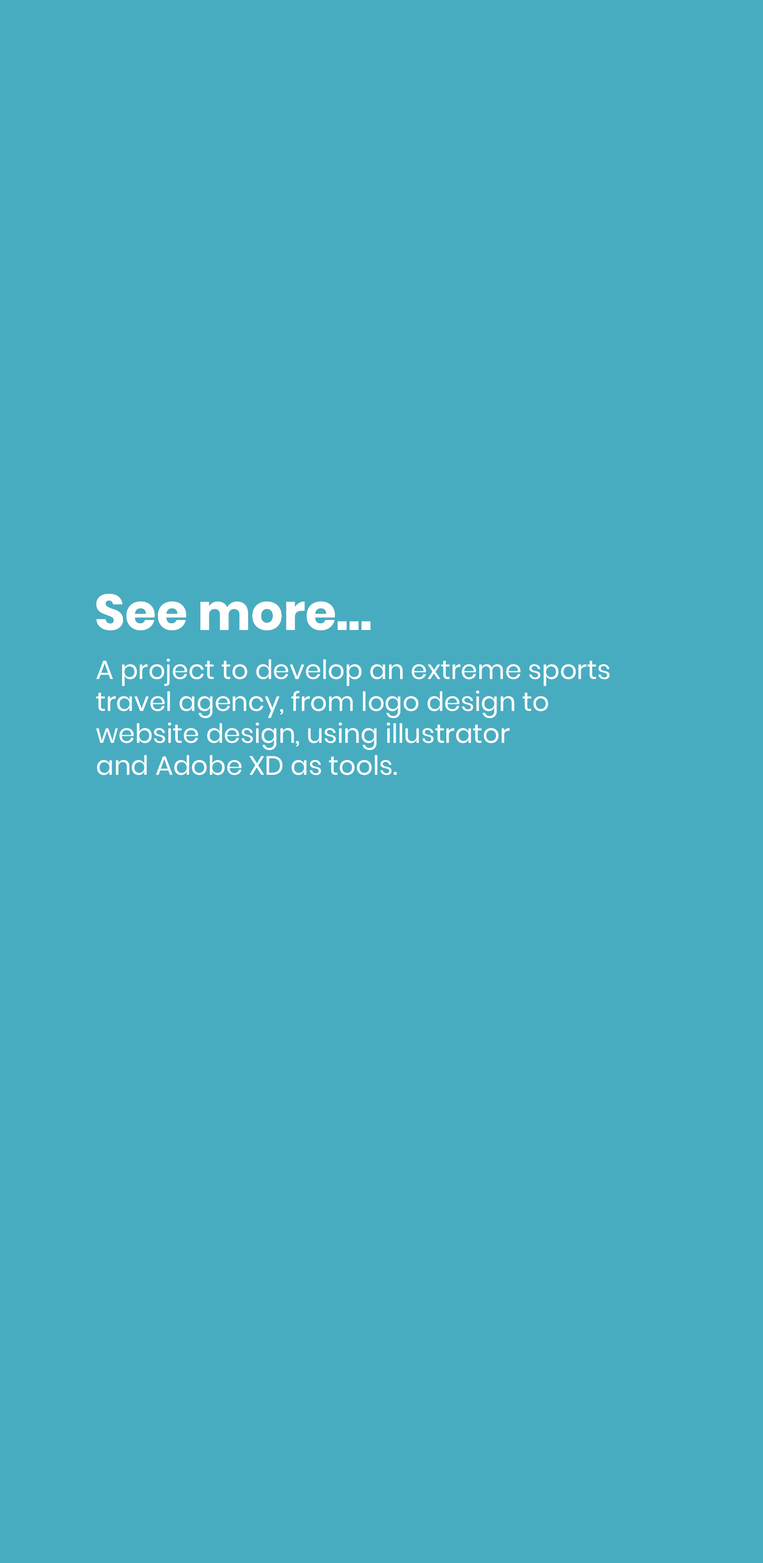
<style>
.page{position:relative;width:763px;height:1563px;background:#48acc0}
.page>*{position:absolute;margin:0}
.t1{font:50.4px "Poppins-Bold";color:#ffffff}
.t2{font:26.6px "Poppins-Regular";color:#ffffff}
</style>
<div class="page">
<p class="t1" style="left:96px;top:594px;width:274px;height:37px">See more...</p>
<p class="t2" style="left:96px;top:659px;width:513px;height:117px">A project to develop an extreme sports<br>travel agency, from logo design to <br>website design, using illustrator<br>and Adobe XD as tools.</p>
</div>
